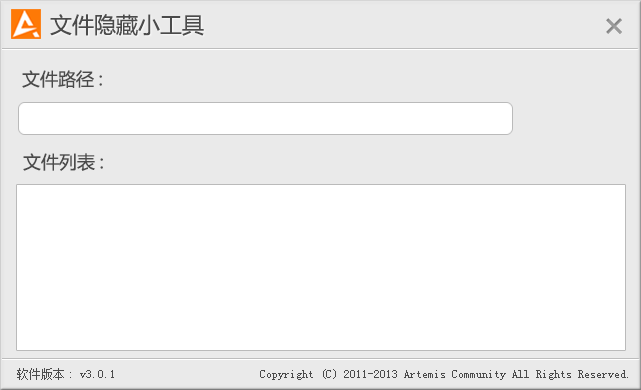
<style>
.page{position:relative;width:641px;height:390px;background:#eaeaea}
.page>*{position:absolute;margin:0}
.t1{font:22px "MicrosoftYaHei";color:#4b4b4b}
.t2{font:18px "MicrosoftYaHei";color:#4b4b4b}
.t3{font:12px "NSimSun";color:#4b4b4b}
</style>
<div class="page">
<p class="t1" style="left:50px;top:14px;width:154px;height:22px">文件隐藏小工具</p>
<p class="t2" style="left:22px;top:70px;width:80px;height:18px">文件路径:</p>
<p class="t2" style="left:23px;top:153px;width:80px;height:18px">文件列表:</p>
<p class="t3" style="left:17px;top:368px;width:611px;height:12px">软件版本: v3.0.1                        Copyright (C) 2011-2013 Artemis Community All Rights Reserved.</p>
</div>
